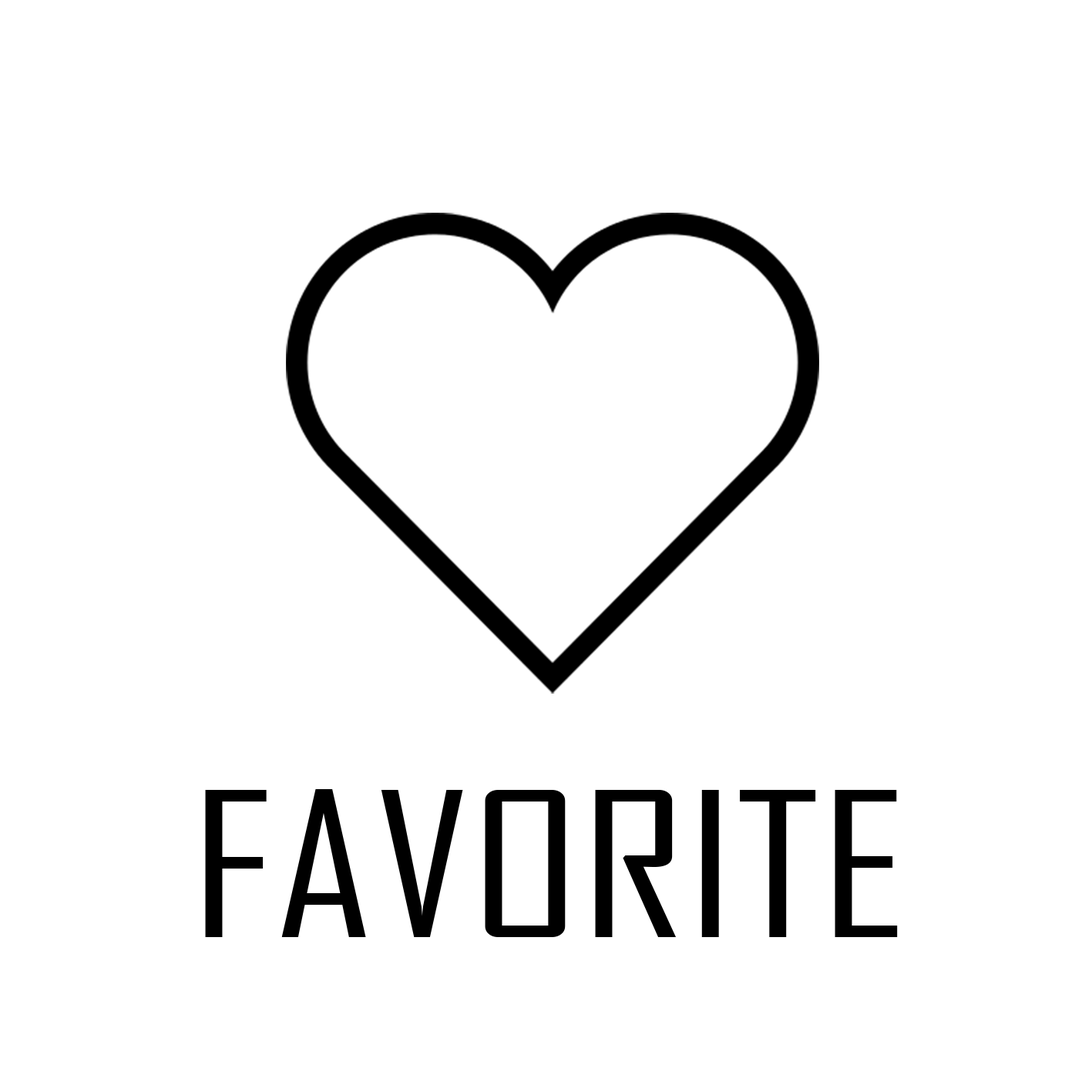
<style>
.page{position:relative;width:1092px;height:1092px;background:#ffffff}
.page>*{position:absolute;margin:0}
.t1{font:192.6px "AgencyFB-Reg";color:#000000;scale:1.29 1}
</style>
<div class="page">
<p class="t1" style="left:205px;top:789px;width:693px;height:148px">FAVORITE</p>
</div>
